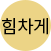
<style>
.page{position:relative;width:51px;height:51px;background:#ecd486}
.page>*{position:absolute;margin:0}
.t1{font:18px "NotoSansKR-Regular";letter-spacing:-0.025em;color:#000000;text-transform:uppercase}
</style>
<div class="page">
<p class="t1" style="left:2px;top:18px;width:46px;height:17px">힘차게</p>
</div>
